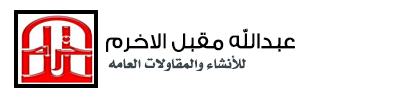
<style>
.page{position:relative;width:400px;height:100px;background:#ffffff}
.page>*{position:absolute;margin:0}
.t1{font:22px "GESSTwoLight-Light";color:#020303;font-weight:bold}
.t2{font:15px "Khalid-Art-bold";color:#39454a}
</style>
<div class="page">
<p class="t1" style="left:106px;top:28px;width:189px;height:24px">عبدالله مقبل الاخرم</p>
<p class="t2" style="left:108px;top:55px;width:139px;height:17px">للأنشاء والمقاولات العامه</p>
</div>
